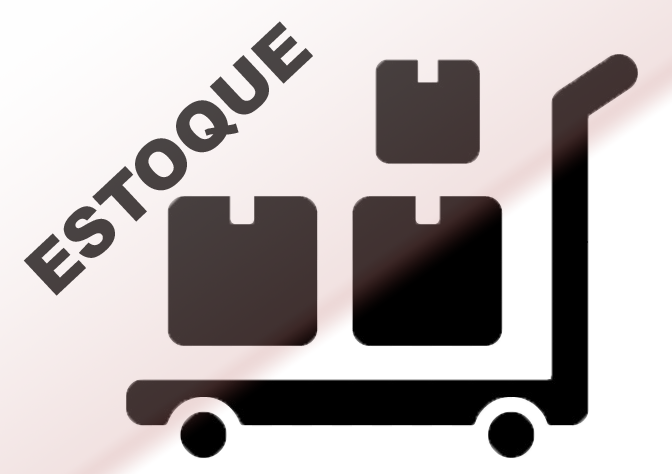
<style>
.page{position:relative;width:672px;height:474px}
.page>*{position:absolute;margin:0}
.t1{font:67.1px "Arial-Black";color:#484342}
</style>
<div class="page">
<p class="t1" style="left:23px;top:21px;width:290px;height:275px;rotate:-43deg">ESTOQUE</p>
</div>
